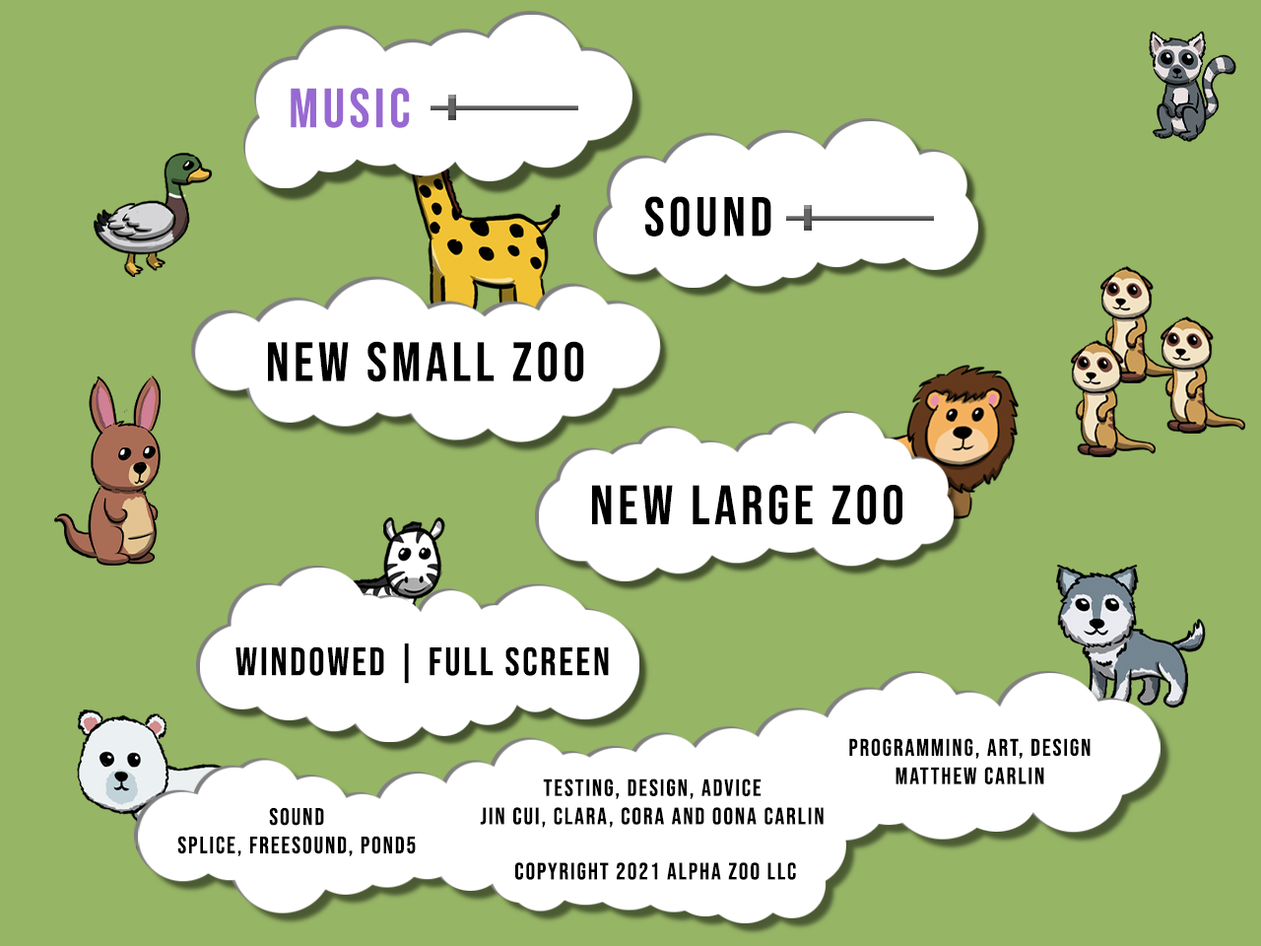
<style>
.page{position:relative;width:1261px;height:946px;background:#96b565}
.page>*{position:absolute;margin:0}
.t1{font:55.2px "BebasNeue-Regular";letter-spacing:0.08em;color:#9869d2}
.t2{font:55.2px "BebasNeue-Regular";letter-spacing:0.08em;color:#000000}
.t3{font:39.4px "BebasNeue-Regular";letter-spacing:0.07em;color:#000000}
.t4{font:23.6px "BebasNeue-Regular";letter-spacing:0.08em;color:#000000}
</style>
<div class="page">
<p class="t1" style="left:291px;top:88px;width:119px;height:40px">MUSIC</p>
<p class="t2" style="left:645px;top:196px;width:126px;height:40px">SOUND</p>
<p class="t2" style="left:268px;top:341px;width:316px;height:41px">NEW SMALL ZOO</p>
<p class="t2" style="left:592px;top:485px;width:310px;height:40px">NEW LARGE ZOO</p>
<p class="t3" style="left:235px;top:643px;width:374px;height:41px">WINDOWED | FULL SCREEN</p>
<p class="t4" style="left:849px;top:738px;width:241px;height:46px;text-align:center">programming, ART, DESIGN<br>Matthew Carlin</p>
<p class="t4" style="left:480px;top:778px;width:344px;height:49px;text-align:center">TESTING, DESIGN, ADVICE<br>JIN CUI, clARA, CORA and OONA CARLIN</p>
<p class="t4" style="left:177px;top:807px;width:239px;height:49px;text-align:center">SOUND<br>SPLICE, FREESOUND, POND5</p>
<p class="t4" style="left:515px;top:862px;width:281px;height:18px">Copyright 2021 AlPHA ZOO LLC</p>
</div>
